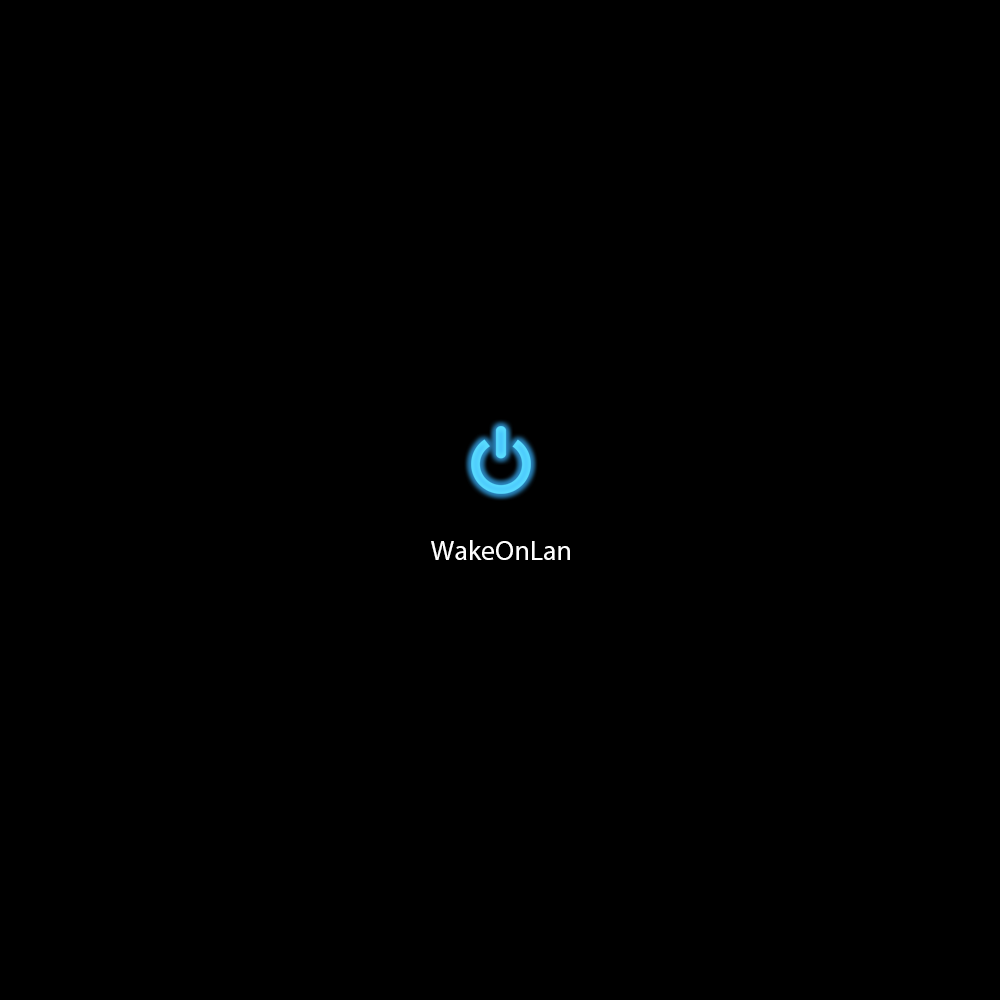
<style>
.page{position:relative;width:1000px;height:1000px;background:#000000}
.page>*{position:absolute;margin:0}
.t1{font:28px "MyriadPro-Regular";color:#ffffff}
</style>
<div class="page">
<p class="t1" style="left:431px;top:540px;width:139px;height:20px">WakeOnLan</p>
</div>
